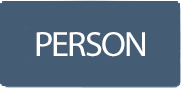
<style>
.page{position:relative;width:181px;height:89px;background:#445d74}
.page>*{position:absolute;margin:0}
.t1{font:35.3px "MyriadPro-Regular";letter-spacing:-0.05em;color:#ffffff}
</style>
<div class="page">
<p class="t1" style="left:36px;top:32px;width:109px;height:25px">PERSON</p>
</div>
